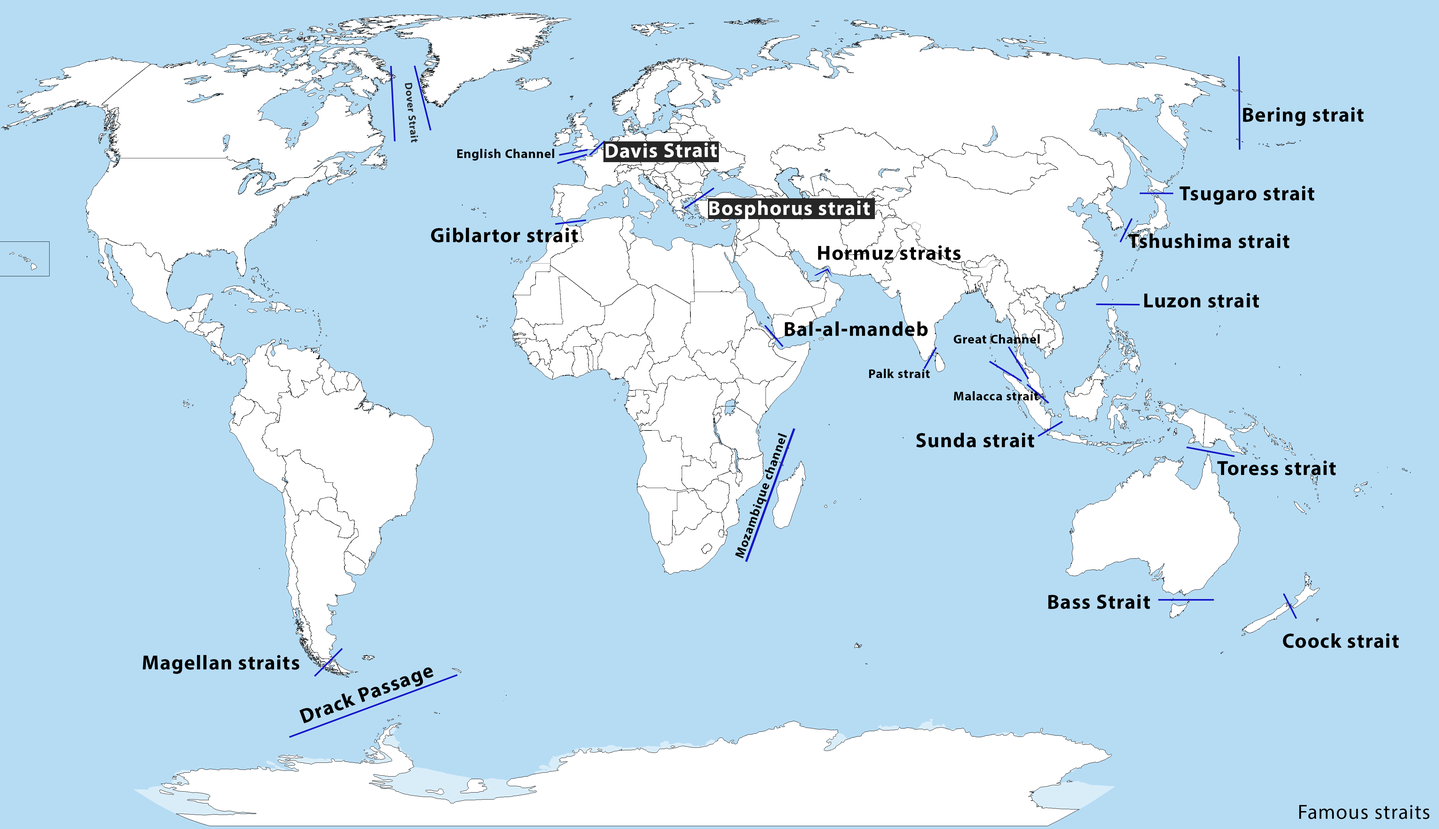
<style>
.page{position:relative;width:1439px;height:829px;background:#b6dcf4}
.page>*{position:absolute;margin:0}
.t1{font:10.4px "MyriadHebrew-Bold";letter-spacing:0.04em;color:#272727}
.t2{font:20.5px "MyriadHebrew-Bold";letter-spacing:0.04em;color:#000000}
.t3{font:12.8px "MyriadHebrew-Bold";letter-spacing:0.04em;color:#000000}
.t4{font:20.5px "MyriadHebrew-Bold";letter-spacing:0.04em;color:#fdfdfd}
.t5{font:20.5px "MyriadHebrew-Regular";letter-spacing:0.04em;color:#000000}
</style>
<div class="page">
<p class="t1" style="left:405px;top:83px;width:13px;height:60px;rotate:84deg">Dover Strait</p>
<p class="t2" style="left:1243px;top:107px;width:120px;height:19px">Bering strait</p>
<p class="t3" style="left:457px;top:149px;width:97px;height:12px">English Channel</p>
<p class="t4" style="left:606px;top:143px;width:111px;height:15px">Davis Strait</p>
<p class="t2" style="left:1179px;top:186px;width:135px;height:19px">Tsugaro strait</p>
<p class="t4" style="left:709px;top:200px;width:161px;height:19px">Bosphorus strait</p>
<p class="t2" style="left:431px;top:228px;width:147px;height:14px">Giblartor strait</p>
<p class="t2" style="left:1128px;top:233px;width:161px;height:15px">Tshushima strait</p>
<p class="t2" style="left:818px;top:245px;width:142px;height:15px">Hormuz straits</p>
<p class="t2" style="left:1144px;top:293px;width:115px;height:15px">Luzon strait</p>
<p class="t2" style="left:785px;top:321px;width:143px;height:15px">Bal-al-mandeb</p>
<p class="t3" style="left:953px;top:334px;width:86px;height:9px">Great Channel</p>
<p class="t3" style="left:869px;top:369px;width:61px;height:9px">Palk strait</p>
<p class="t3" style="left:954px;top:391px;width:84px;height:9px">Malacca strait</p>
<p class="t3" style="left:735px;top:433px;width:52px;height:125px;rotate:-70deg">Mozambique channel</p>
<p class="t2" style="left:916px;top:433px;width:118px;height:14px">Sunda strait</p>
<p class="t2" style="left:1217px;top:460px;width:119px;height:15px">Toress strait</p>
<p class="t2" style="left:1048px;top:594px;width:102px;height:15px">Bass Strait</p>
<p class="t2" style="left:1283px;top:633px;width:116px;height:15px">Coock strait</p>
<p class="t2" style="left:143px;top:655px;width:156px;height:19px">Magellan straits</p>
<p class="t2" style="left:299px;top:667px;width:135px;height:56px;rotate:-20deg">Drack Passage</p>
<p class="t5" style="left:1299px;top:805px;width:130px;height:14px">Famous straits</p>
</div>
